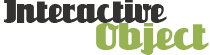
<style>
.page{position:relative;width:210px;height:55px;background:#ffffff}
.page>*{position:absolute;margin:0}
.t1{font:30px "Unicorn";color:#333230}
.t2{font:36px "Unicorn";color:#97b250}
</style>
<div class="page">
<p class="t1" style="left:4px;top:0px;width:163px;height:23px">Interactive</p>
<p class="t2" style="left:96px;top:23px;width:113px;height:32px">Object</p>
</div>
